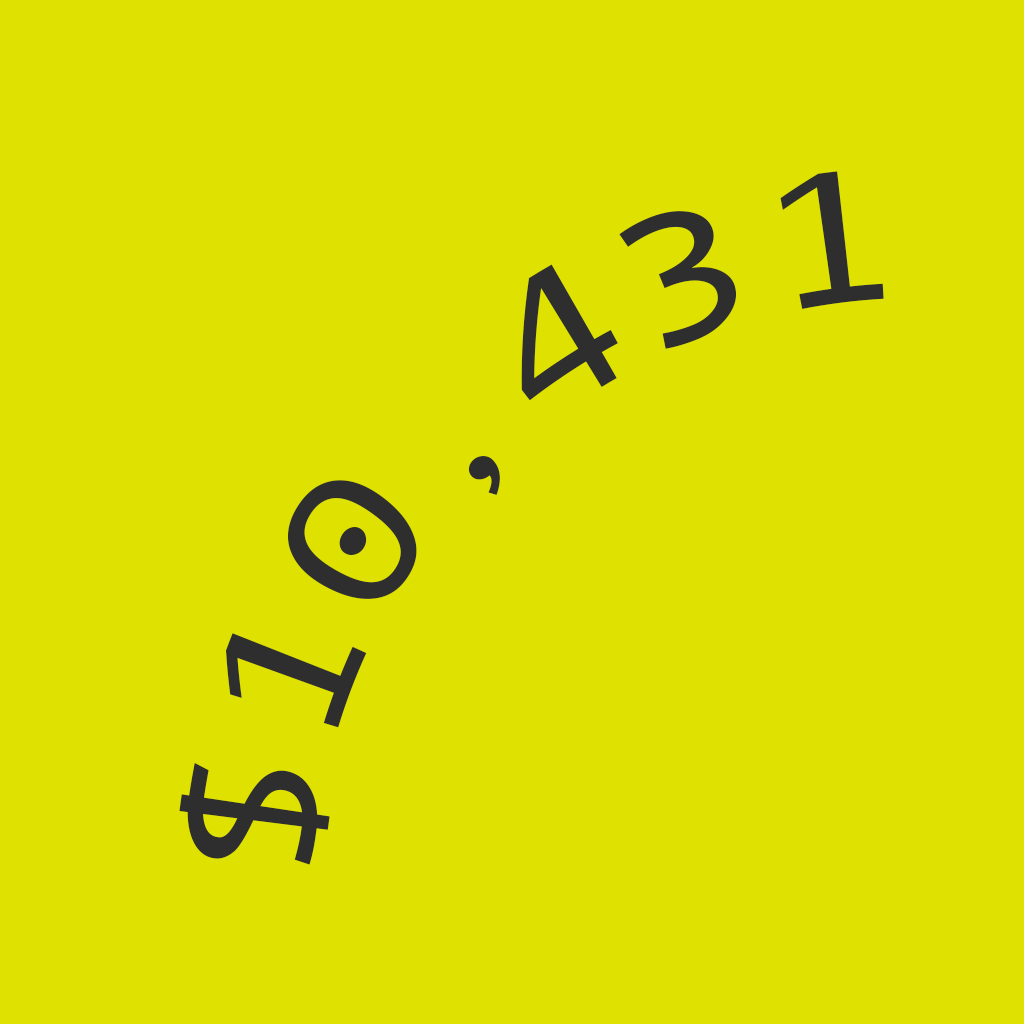
<style>
.page{position:relative;width:1024px;height:1024px;background:#dfe200}
.page>*{position:absolute;margin:0}
.t1{font:186.8px "AndaleMono";color:#2e2e2e}
</style>
<div class="page">
<p class="t1" style="left:179px;top:171px;width:705px;height:694px;rotate:-45deg">$10,431</p>
</div>
